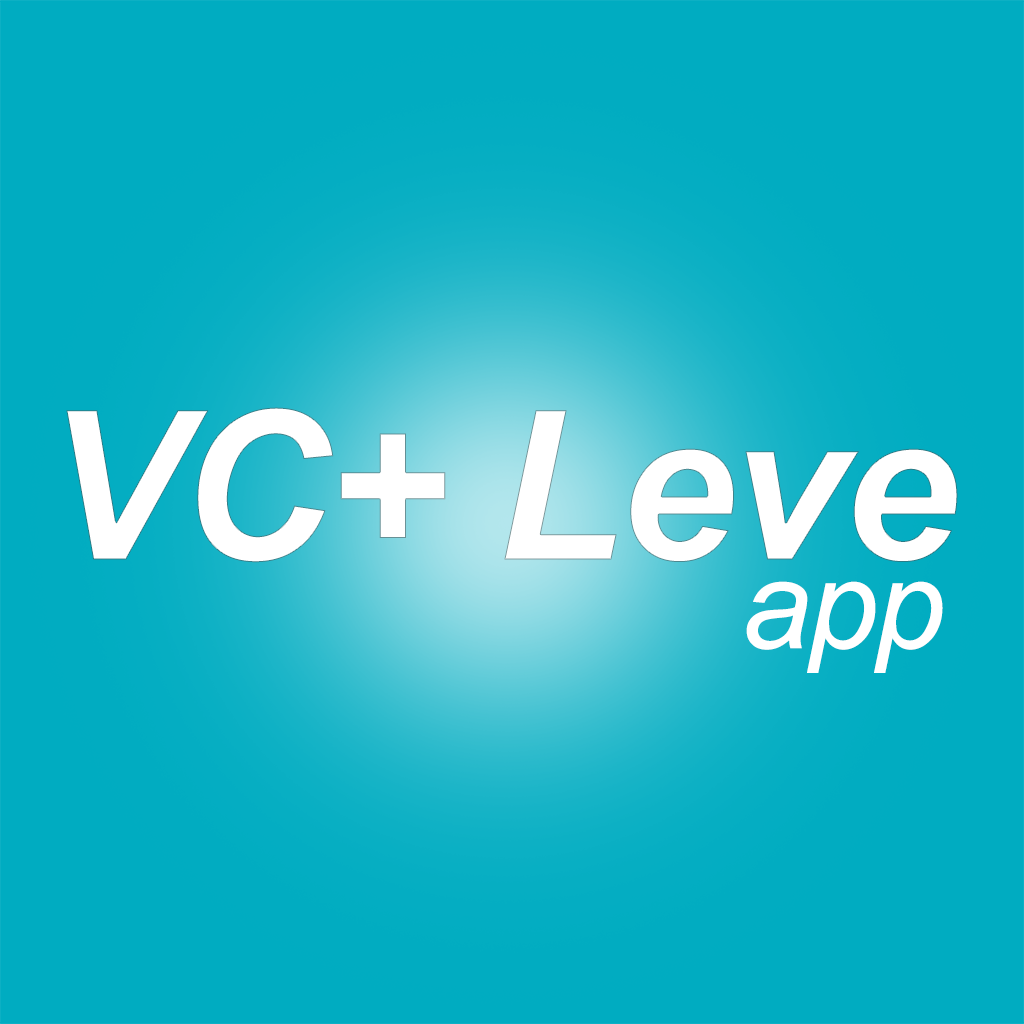
<style>
.page{position:relative;width:1024px;height:1024px;background:#00acc1}
.page>*{position:absolute;margin:0}
.t1{font:208.3px "Arial-BoldItalicMT";letter-spacing:-0.02em;color:#ffffff}
.t2{font:125px "Arial-ItalicMT";letter-spacing:-0.02em;color:#ffffff}
</style>
<div class="page">
<p class="t1" style="left:66px;top:407px;width:892px;height:156px">VC+ Leve</p>
<p class="t2" style="left:746px;top:581px;width:197px;height:92px">app</p>
</div>
